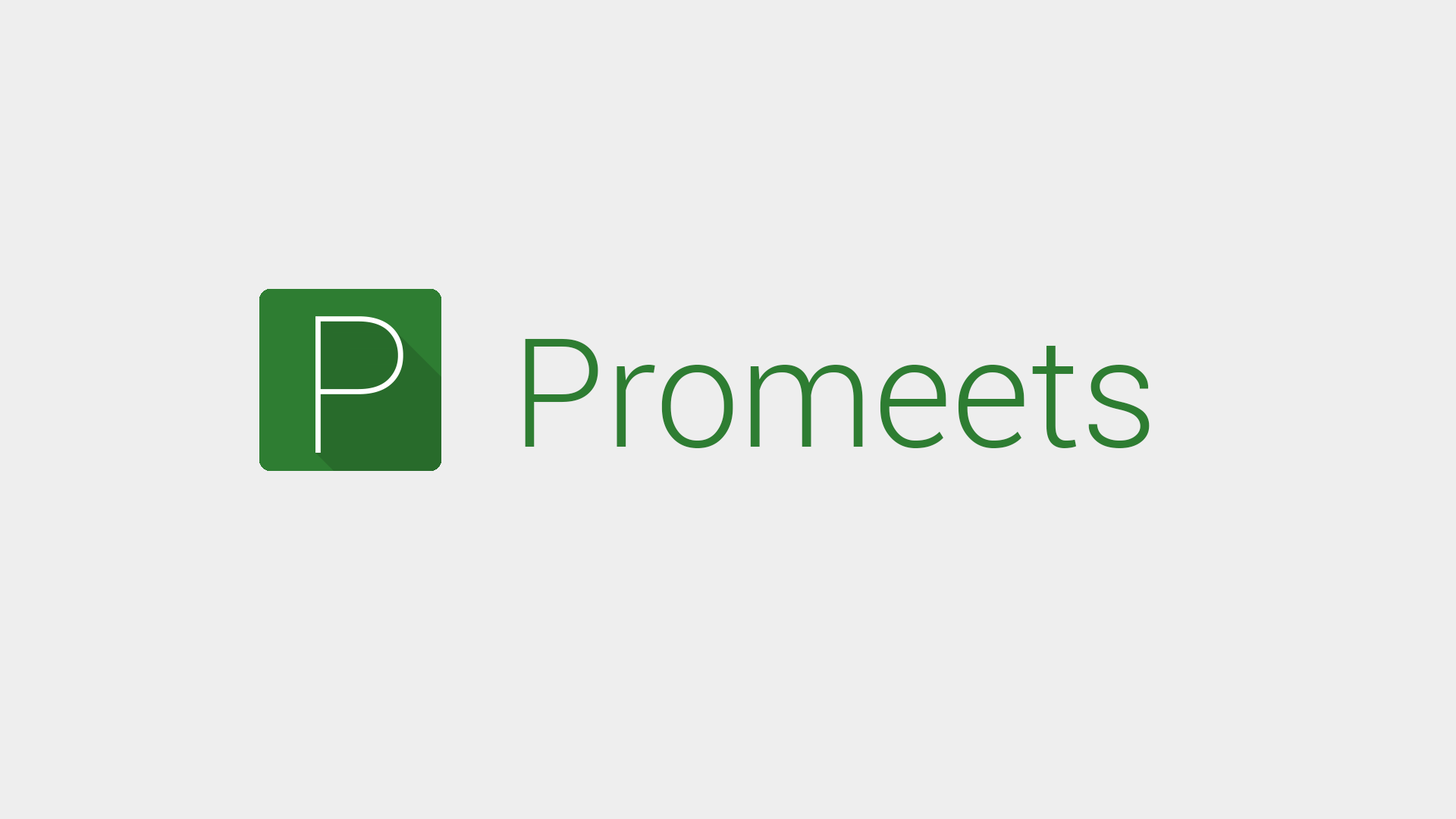
<style>
.page{position:relative;width:1456px;height:819px;background:#eeeeee}
.page>*{position:absolute;margin:0}
.t1{font:151.7px "Roboto-Light";color:#2e7d32}
</style>
<div class="page">
<p class="t1" style="left:525px;top:338px;width:625px;height:110px">Promeets</p>
</div>
